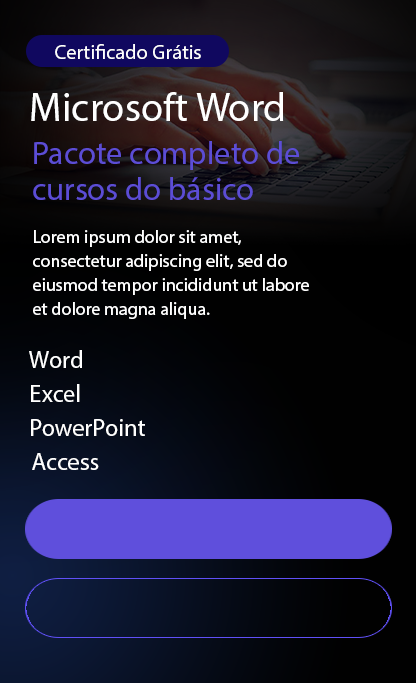
<style>
.page{position:relative;width:416px;height:683px}
.page>*{position:absolute;margin:0}
.t1{font:20.5px "MyriadPro-Regular";color:#ffffff}
.t2{font:40.4px "MyriadPro-Regular";color:#ffffff}
.t3{font:32.4px/36px "MyriadPro-Regular";color:#5c4dd5}
.t4{font:18px/24px "MyriadPro-Regular";color:#ffffff}
.t5{font:24.3px "MyriadPro-Regular";color:#ffffff}
</style>
<div class="page">
<p class="t1" style="left:55px;top:44px;width:146px;height:15px">Certificado Grátis</p>
<p class="t2" style="left:31px;top:92px;width:253px;height:29px">Microsoft Word</p>
<p class="t3" style="left:33px;top:141px;width:266px;height:59px">Pacote completo de<br>cursos do básico</p>
<p class="t4" style="left:33px;top:230px;width:276px;height:89px">Lorem ipsum dolor sit amet, consectetur adipiscing elit, sed do eiusmod tempor incididunt ut labore et dolore magna aliqua.</p>
<p class="t5" style="left:29px;top:350px;width:53px;height:18px">Word</p>
<p class="t5" style="left:31px;top:384px;width:49px;height:18px">Excel</p>
<p class="t5" style="left:31px;top:419px;width:114px;height:17px">PowerPoint</p>
<p class="t5" style="left:32px;top:453px;width:67px;height:17px">Access</p>
</div>
